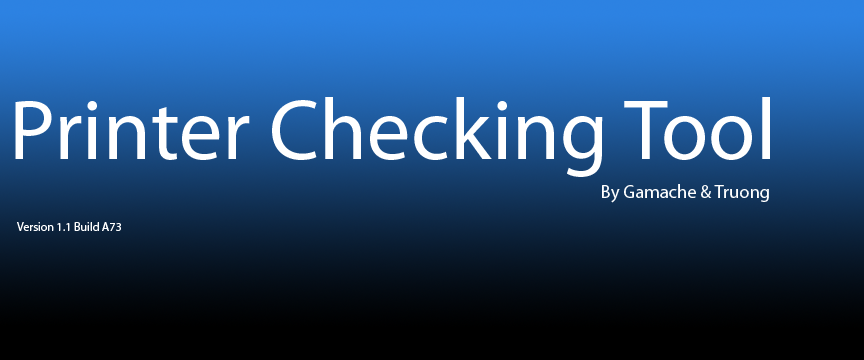
<style>
.page{position:relative;width:864px;height:360px}
.page>*{position:absolute;margin:0}
.t1{font:86.8px "MyriadPro-Regular";color:#ffffff}
.t2{font:18.5px "MyriadPro-Regular";color:#ffffff}
.t3{font:12px "MyriadPro-Regular";color:#ffffff}
</style>
<div class="page">
<p class="t1" style="left:15px;top:97px;width:755px;height:80px">Printer Checking Tool</p>
<p class="t2" style="left:602px;top:184px;width:167px;height:19px">By Gamache &amp; Truong</p>
<p class="t3" style="left:17px;top:222px;width:104px;height:9px">Version 1.1 Build A73</p>
</div>
